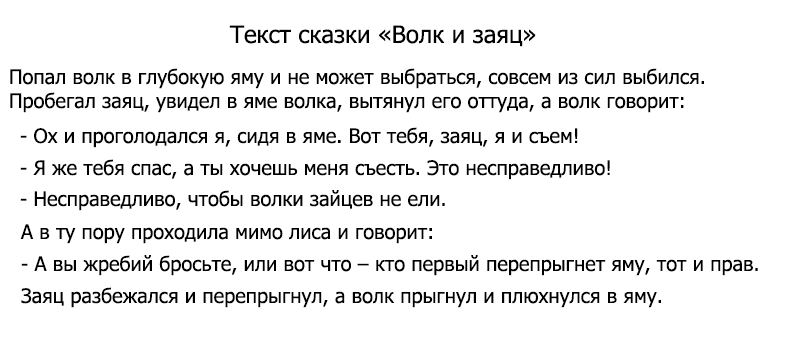
<style>
.page{position:relative;width:805px;height:350px;background:#ffffff}
.page>*{position:absolute;margin:0}
.t1{font:24px "Tahoma";color:#000000}
.t2{font:20px "Tahoma";color:#000000}
</style>
<div class="page">
<p class="t1" style="left:229px;top:25px;width:307px;height:22px">Текст сказки «Волк и заяц»</p>
<p class="t2" style="left:10px;top:68px;width:694px;height:45px;text-align:right">Попал волк в глубокую яму и не может выбраться, совсем из сил выбился. <br>Пробегал заяц, увидел в яме волка, вытянул его оттуда, а волк говорит:</p>
<p class="t2" style="left:20px;top:127px;width:558px;height:21px">- Ох и проголодался я, сидя в яме. Вот тебя, заяц, я и съем!</p>
<p class="t2" style="left:20px;top:159px;width:590px;height:21px">- Я же тебя спас, а ты хочешь меня съесть. Это несправедливо!</p>
<p class="t2" style="left:20px;top:190px;width:425px;height:21px">- Несправедливо, чтобы волки зайцев не ели.</p>
<p class="t2" style="left:20px;top:224px;width:412px;height:20px">А в ту пору проходила мимо лиса и говорит:</p>
<p class="t2" style="left:21px;top:255px;width:737px;height:21px">- А вы жребий бросьте, или вот что – кто первый перепрыгнет яму, тот и прав.</p>
<p class="t2" style="left:21px;top:287px;width:640px;height:21px">Заяц разбежался и перепрыгнул, а волк прыгнул и плюхнулся в яму.</p>
</div>
